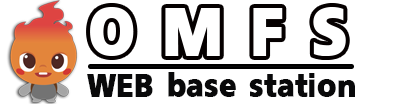
<style>
.page{position:relative;width:398px;height:104px;background:#ffffff}
.page>*{position:absolute;margin:0}
.t1{font:104.2px "PSLImperialExtra";color:#ffffff}
.t2{font:50.4px "PSLImperialExtra";color:#09090a}
</style>
<div class="page">
<p class="t1" style="left:90px;top:7px;width:256px;height:49px">O M F S</p>
<p class="t2" style="left:87px;top:72px;width:268px;height:25px">WEB base station</p>
</div>
